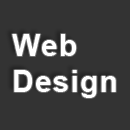
<style>
.page{position:relative;width:130px;height:130px;background:#333333}
.page>*{position:absolute;margin:0}
.t1{font:30px "Arial-BoldMT";letter-spacing:0.04em;color:#ffffff}
</style>
<div class="page">
<p class="t1" style="left:12px;top:34px;width:104px;height:64px">Web<br>Design</p>
</div>
